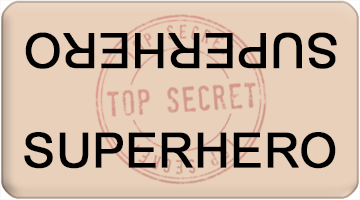
<style>
.page{position:relative;width:360px;height:200px;background:#e8d0bb}
.page>*{position:absolute;margin:0}
.t1{font:48px "ArialMT";color:#000000;font-weight:bold}
</style>
<div class="page">
<p class="t1" style="left:25px;top:32px;width:312px;height:37px;rotate:180deg">SUPERHERO</p>
<p class="t1" style="left:24px;top:132px;width:312px;height:37px">SUPERHERO</p>
</div>
